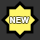
<style>
.page{position:relative;width:40px;height:40px;background:#333333}
.page>*{position:absolute;margin:0}
.t1{font:8.3px "Arial-BoldMT";color:#ffffff}
</style>
<div class="page">
<p class="t1" style="left:10px;top:17px;width:19px;height:6px">NEW</p>
</div>
